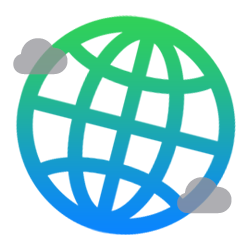
<style>
.page{position:relative;width:250px;height:250px;background:#ffffff}
.page>*{position:absolute;margin:0}
.t1{font:51.5px "SFCompact-Regular";letter-spacing:0.05em}
</style>
<div class="page">
<p class="t1" style="left:13px;top:38px;width:55px;height:37px">􀇃</p>
<p class="t1" style="left:177px;top:177px;width:55px;height:37px">􀇃</p>
</div>
